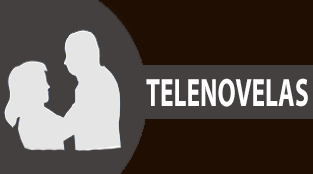
<style>
.page{position:relative;width:313px;height:174px;background:#1f0e01}
.page>*{position:absolute;margin:0}
.t1{font:39.7px "MyriadPro-Bold";color:#ffffff;scale:0.64 1}
</style>
<div class="page">
<p class="t1" style="left:146px;top:78px;width:162px;height:29px">TELENOVELAS</p>
</div>
